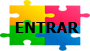
<style>
.page{position:relative;width:90px;height:51px;background:#ffffff}
.page>*{position:absolute;margin:0}
.t1{font:15.3px "Tahoma-Bold";color:#000000}
</style>
<div class="page">
<p class="t1" style="left:15px;top:22px;width:64px;height:11px">ENTRAR</p>
</div>
